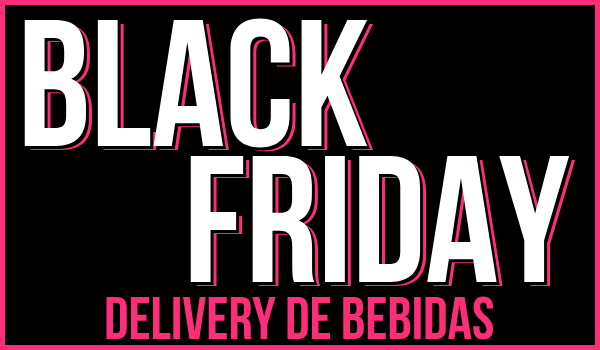
<style>
.page{position:relative;width:600px;height:350px;background:#000000}
.page>*{position:absolute;margin:0}
.t1{font:180px "BebasNeueBold";color:#ffffff}
.t2{font:60px "BebasNeueBold";color:#fd2e79}
</style>
<div class="page">
<p class="t1" style="left:24px;top:18px;width:344px;height:130px">BLACK</p>
<p class="t1" style="left:27px;top:21px;width:344px;height:130px">BLACK</p>
<p class="t1" style="left:30px;top:22px;width:344px;height:130px">BLACK</p>
<p class="t1" style="left:190px;top:156px;width:380px;height:126px">FRIDAY</p>
<p class="t1" style="left:193px;top:159px;width:380px;height:126px">FRIDAY</p>
<p class="t1" style="left:196px;top:160px;width:380px;height:126px">FRIDAY</p>
<p class="t2" style="left:106px;top:296px;width:388px;height:44px">Delivery de bebidas</p>
</div>
